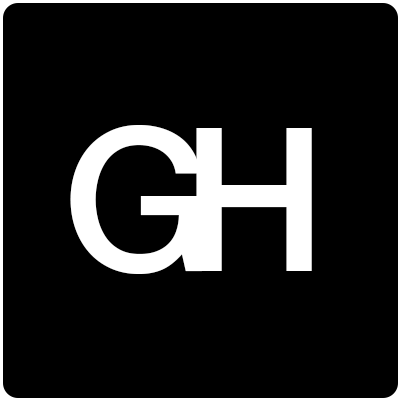
<style>
.page{position:relative;width:400px;height:400px;background:#000000}
.page>*{position:absolute;margin:0}
.t1{font:200px "HelveticaNeue-Medium";color:#ffffff}
</style>
<div class="page">
<p class="t1" style="left:70px;top:125px;width:132px;height:149px">G</p>
<p class="t1" style="left:196px;top:128px;width:116px;height:143px">H</p>
</div>
